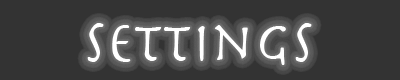
<style>
.page{position:relative;width:400px;height:80px;background:#333333}
.page>*{position:absolute;margin:0}
.t1{font:58.3px "Herculanum";color:#ffffff}
</style>
<div class="page">
<p class="t1" style="left:87px;top:23px;width:225px;height:42px">settings</p>
</div>
